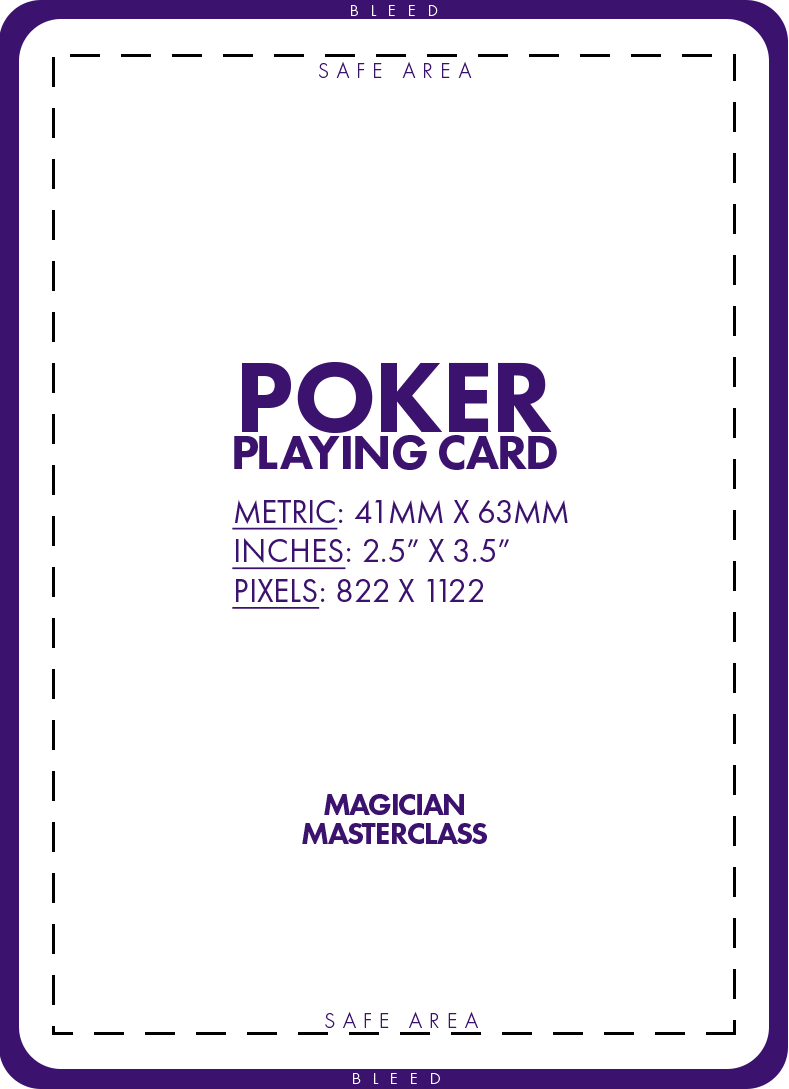
<style>
.page{position:relative;width:789px;height:1089px;background:#ffffff}
.page>*{position:absolute;margin:0}
.t1{font:16.7px "FuturaPT-Light";letter-spacing:0.7em;color:#ffffff;text-transform:uppercase}
.t2{font:22.1px "FuturaPT-Light";letter-spacing:0.32em;color:#3b126d;text-transform:uppercase}
.t3{font:49.5px/37px "FuturaPT-Heavy";letter-spacing:-0.04em;color:#3b126d;text-transform:uppercase}
.t4{font:103.4px/69.4px "FuturaPT-Heavy";letter-spacing:-0.04em;color:#3b126d;text-transform:uppercase}
.t5{font:33.3px/8.3px "FuturaPT-Book";color:#3b126d;text-transform:uppercase}
.t6{font:33.3px/8.3px "FuturaPT-Book";color:#3b126d;text-transform:uppercase;text-decoration:underline}
.t7{font:31.4px/0px "FuturaPT-Heavy";letter-spacing:-0.06em;color:#3b126d;text-transform:uppercase}
</style>
<div class="page">
<p class="t1" style="left:351px;top:5px;width:87px;height:11px">BLEED</p>
<p class="t2" style="left:319px;top:62px;width:153px;height:16px">SAFE AREA</p>
<p class="t3" style="left:234px;top:361px;width:323px;height:109px;text-align:center"><span class="t4">POKER<br></span>PLAYING CARD</p>
<p class="t5" style="left:232px;top:500px;width:336px;height:109px"><span class="t6">Metric</span>: 41mm x 63mm<br><span class="t6">Inches</span>: 2.5” x 3.5”<br><span class="t6">Pixels</span>: 822 x 1122</p>
<p class="t7" style="left:302px;top:794px;width:185px;height:50px;text-align:center">MAGICIAN<br>MASTERCLASS</p>
<p class="t2" style="left:325px;top:1012px;width:153px;height:16px">SAFE AREA</p>
<p class="t1" style="left:353px;top:1073px;width:87px;height:11px">BLEED</p>
</div>
